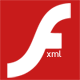
<style>
.page{position:relative;width:80px;height:80px;background:#c81b1b}
.page>*{position:absolute;margin:0}
.t1{font:9.2px "DIN-Medium"}
</style>
<div class="page">
<p class="t1" style="left:46px;top:50px;width:16px;height:7px">xml</p>
</div>
